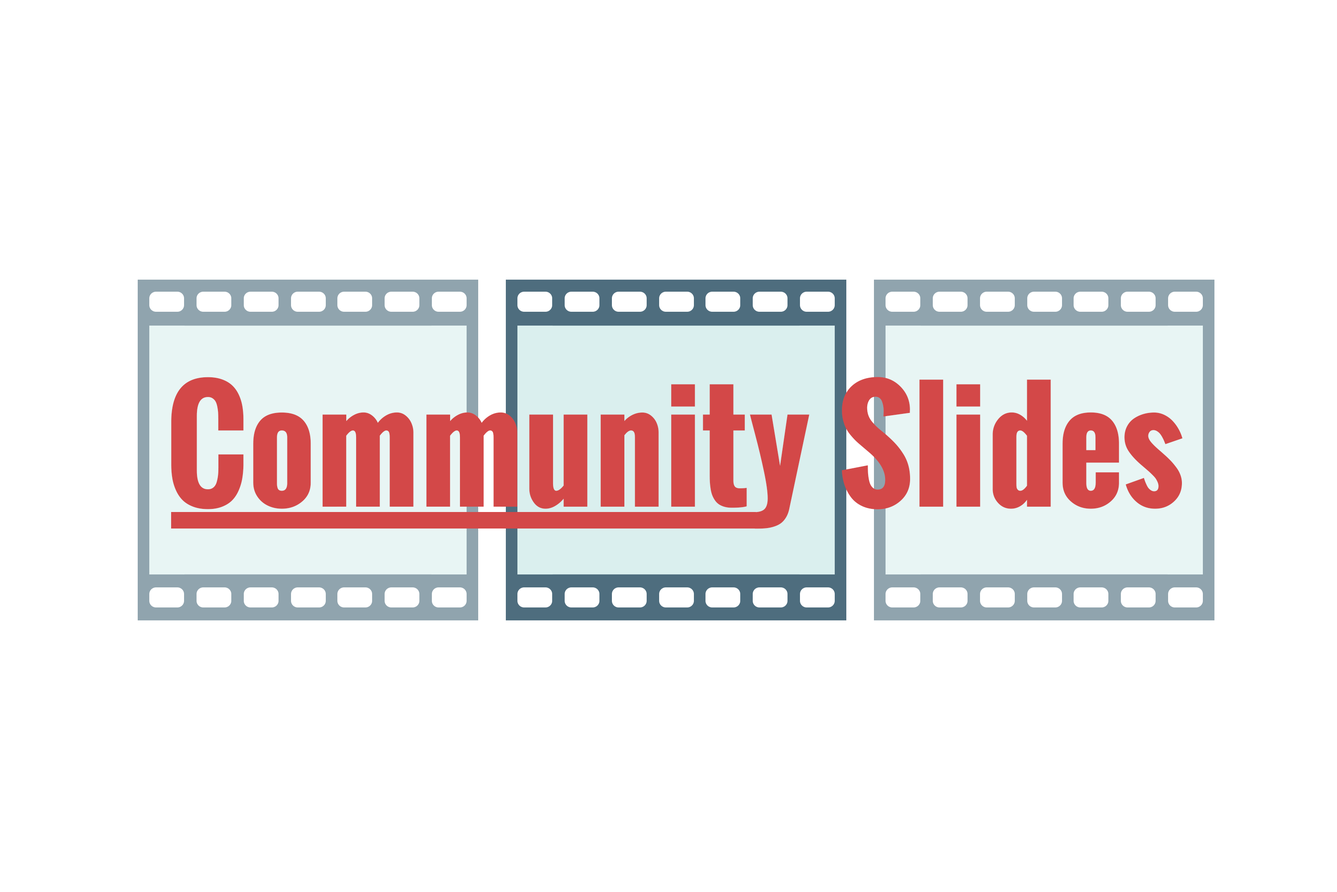
<style>
.page{position:relative;width:1337px;height:892px;background:#ffffff}
.page>*{position:absolute;margin:0}
.t1{font:144.5px "Oswald-Bold";color:#d34848}
</style>
<div class="page">
<p class="t1" style="left:171px;top:377px;width:1012px;height:152px">Community Slides</p>
</div>
